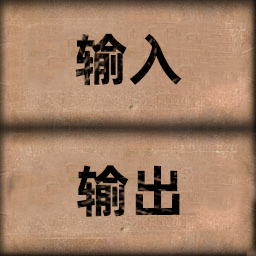
<style>
.page{position:relative;width:256px;height:256px}
.page>*{position:absolute;margin:0}
.t1{font:56px "AlibabaPuHuiTiB";color:#000000}
</style>
<div class="page">
<p class="t1" style="left:75px;top:33px;width:107px;height:53px">输入</p>
<p class="t1" style="left:77px;top:165px;width:103px;height:52px">输出</p>
</div>
